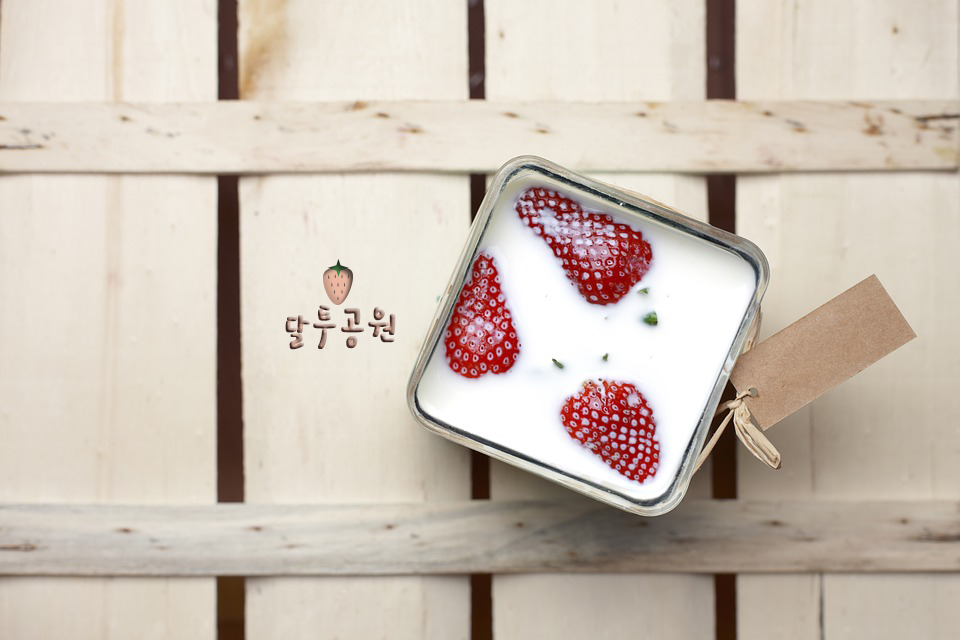
<style>
.page{position:relative;width:960px;height:640px}
.page>*{position:absolute;margin:0}
.t1{font:60.5px "TTOjunohwhooB";font-weight:bold}
</style>
<div class="page">
<p class="t1" style="left:285px;top:305px;width:111px;height:45px">달투공원</p>
</div>
